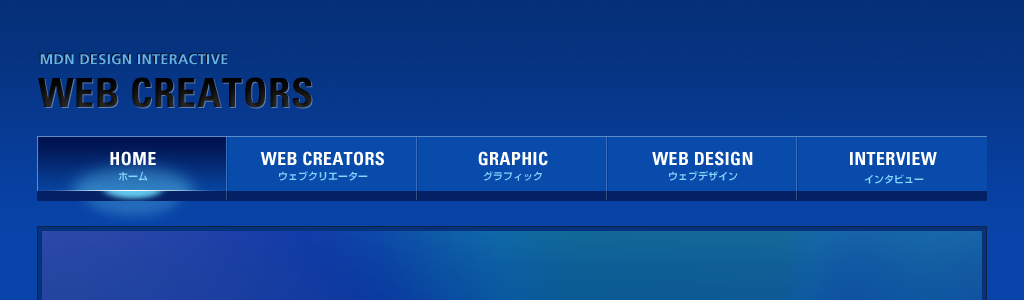
<style>
.page{position:relative;width:1024px;height:300px}
.page>*{position:absolute;margin:0}
.t1{font:18px "Univers-CondensedBold";letter-spacing:0.02em;color:#ffffff}
.t2{font:10px "ShinGoPro-DeBold";color:#86d6ff}
.t3{font:10px "ShinGoPro-DeBold";color:#85d5ff}
</style>
<div class="page">
<p class="t1" style="left:110px;top:151px;width:46px;height:15px">HOME</p>
<p class="t1" style="left:260px;top:151px;width:124px;height:15px">WEB CREATORS</p>
<p class="t1" style="left:478px;top:151px;width:70px;height:15px">GRAPHIC</p>
<p class="t1" style="left:652px;top:151px;width:101px;height:15px">WEB DESIGN</p>
<p class="t1" style="left:850px;top:152px;width:87px;height:13px">INTERVIEW</p>
<p class="t2" style="left:118px;top:172px;width:30px;height:9px">ホーム</p>
<p class="t2" style="left:279px;top:171px;width:89px;height:10px">ウェブクリエーター</p>
<p class="t2" style="left:483px;top:171px;width:59px;height:10px">グラフィック</p>
<p class="t2" style="left:669px;top:171px;width:69px;height:10px">ウェブデザイン</p>
<p class="t3" style="left:864px;top:174px;width:60px;height:10px">インタビュー</p>
</div>
